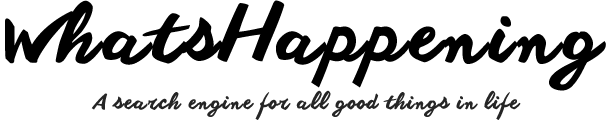
<style>
.page{position:relative;width:611px;height:120px;background:#ffffff}
.page>*{position:absolute;margin:0}
.t1{font:72px "anothershabby";letter-spacing:0.05em;color:#000000}
.t2{font:20px "anothershabby";letter-spacing:0.05em;color:#252525}
</style>
<div class="page">
<p class="t1" style="left:5px;top:0px;width:601px;height:91px">WhatsHappening</p>
<p class="t2" style="left:91px;top:90px;width:430px;height:30px">A search engine for all good things in life</p>
</div>
